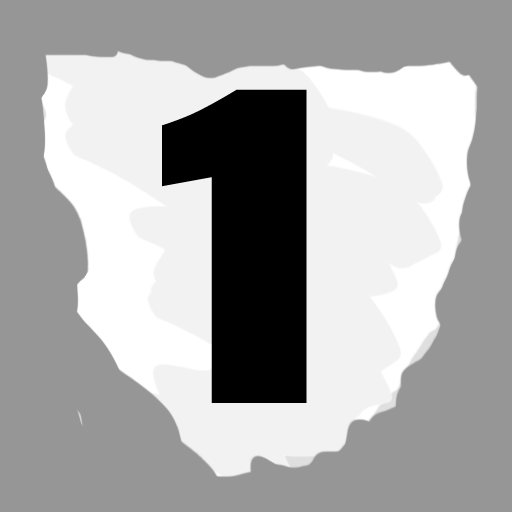
<style>
.page{position:relative;width:512px;height:512px;background:#979696}
.page>*{position:absolute;margin:0}
.t1{font:453.9px "Candal";letter-spacing:-0.015em;color:#000000}
</style>
<div class="page">
<p class="t1" style="left:162px;top:89px;width:145px;height:314px">1</p>
</div>
